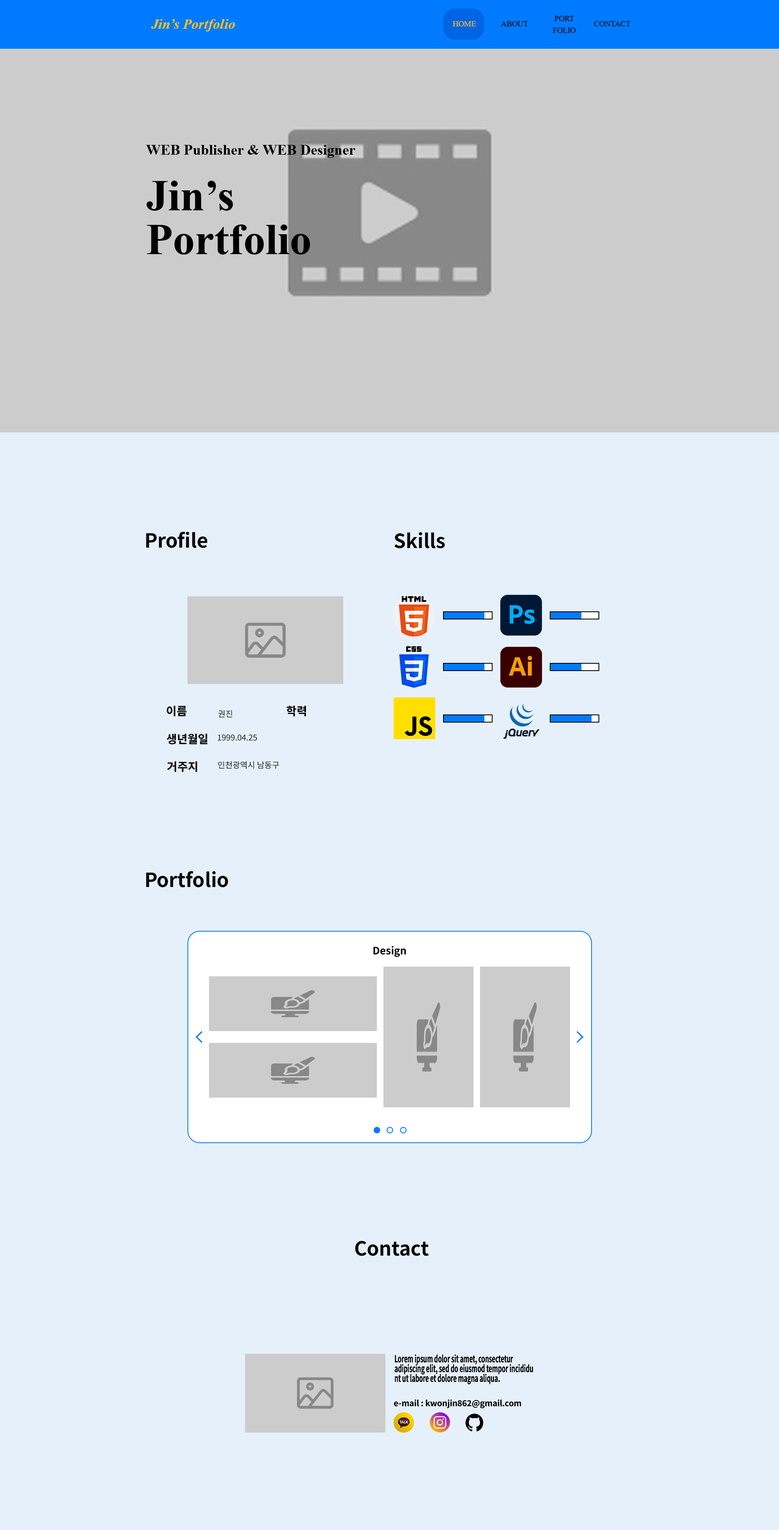
<style>
.page{position:relative;width:779px;height:1530px;background:#e6f0fa}
.page>*{position:absolute;margin:0}
.t1{font:8.1px/11.8px "TimesNewRomanPSMT";color:#000000}
.t2{font:14px "TimesNewRomanPS-BoldItalicMT";color:#ffc107}
.t3{font:8.1px "TimesNewRomanPSMT";color:#ffc107}
.t4{font:8.1px "TimesNewRomanPSMT";color:#000000}
.t5{font:14.6px "TimesNewRomanPS-BoldMT";color:#000000}
.t6{font:43.8px/43.8px "TimesNewRomanPS-BoldMT";color:#000000}
.t7{font:19.5px "NotoSansKR-Bold";color:#000000}
.t8{font:11.4px "NotoSansKR-Bold";color:#000000}
.t9{font:8.1px "NotoSansKR-Regular";color:#343a40}
.t10{font:10.2px "NotoSansKR-Bold";color:#000000}
.t11{font:9.7px/9.7px "NotoSansKR-Bold";color:#000000;scale:0.61 1}
.t12{font:8.1px "NotoSansKR-Bold";color:#000000}
</style>
<div class="page">
<p class="t1" style="left:553px;top:16px;width:23px;height:17px;text-align:center">PORT<br>FOLIO</p>
<p class="t2" style="left:151px;top:19px;width:84px;height:13px">Jin’s Portfolio</p>
<p class="t3" style="left:453px;top:21px;width:24px;height:5px">HOME</p>
<p class="t4" style="left:501px;top:21px;width:28px;height:5px">ABOUT</p>
<p class="t4" style="left:594px;top:21px;width:37px;height:5px">CONTACT</p>
<p class="t5" style="left:146px;top:145px;width:210px;height:13px">WEB Publisher &amp; WEB Designer</p>
<p class="t6" style="left:147px;top:181px;width:163px;height:74px">Jin’s<br>Portfolio</p>
<p class="t7" style="left:146px;top:531px;width:61px;height:17px">Profile</p>
<p class="t7" style="left:395px;top:532px;width:50px;height:16px">Skills</p>
<p class="t8" style="left:167px;top:706px;width:20px;height:10px">이름</p>
<p class="t9" style="left:218px;top:710px;width:15px;height:8px">권진</p>
<p class="t8" style="left:287px;top:706px;width:19px;height:10px">학력</p>
<p class="t8" style="left:167px;top:734px;width:41px;height:10px">생년월일</p>
<p class="t9" style="left:218px;top:734px;width:39px;height:7px">1999.04.25</p>
<p class="t8" style="left:167px;top:761px;width:30px;height:11px">거주지</p>
<p class="t9" style="left:218px;top:761px;width:61px;height:8px">인천광역시 남동구</p>
<p class="t7" style="left:146px;top:871px;width:83px;height:16px">Portfolio</p>
<p class="t10" style="left:373px;top:946px;width:33px;height:11px">Design</p>
<p class="t7" style="left:355px;top:1241px;width:74px;height:15px">Contact</p>
<p class="t11" style="left:395px;top:1354px;width:138px;height:30px">Lorem ipsum dolor sit amet, consectetur <br>adipiscing elit, sed do eiusmod tempor incididu<br>nt ut labore et dolore magna aliqua.</p>
<p class="t12" style="left:394px;top:1399px;width:128px;height:9px">e-mail : kwonjin862@gmail.com</p>
</div>
